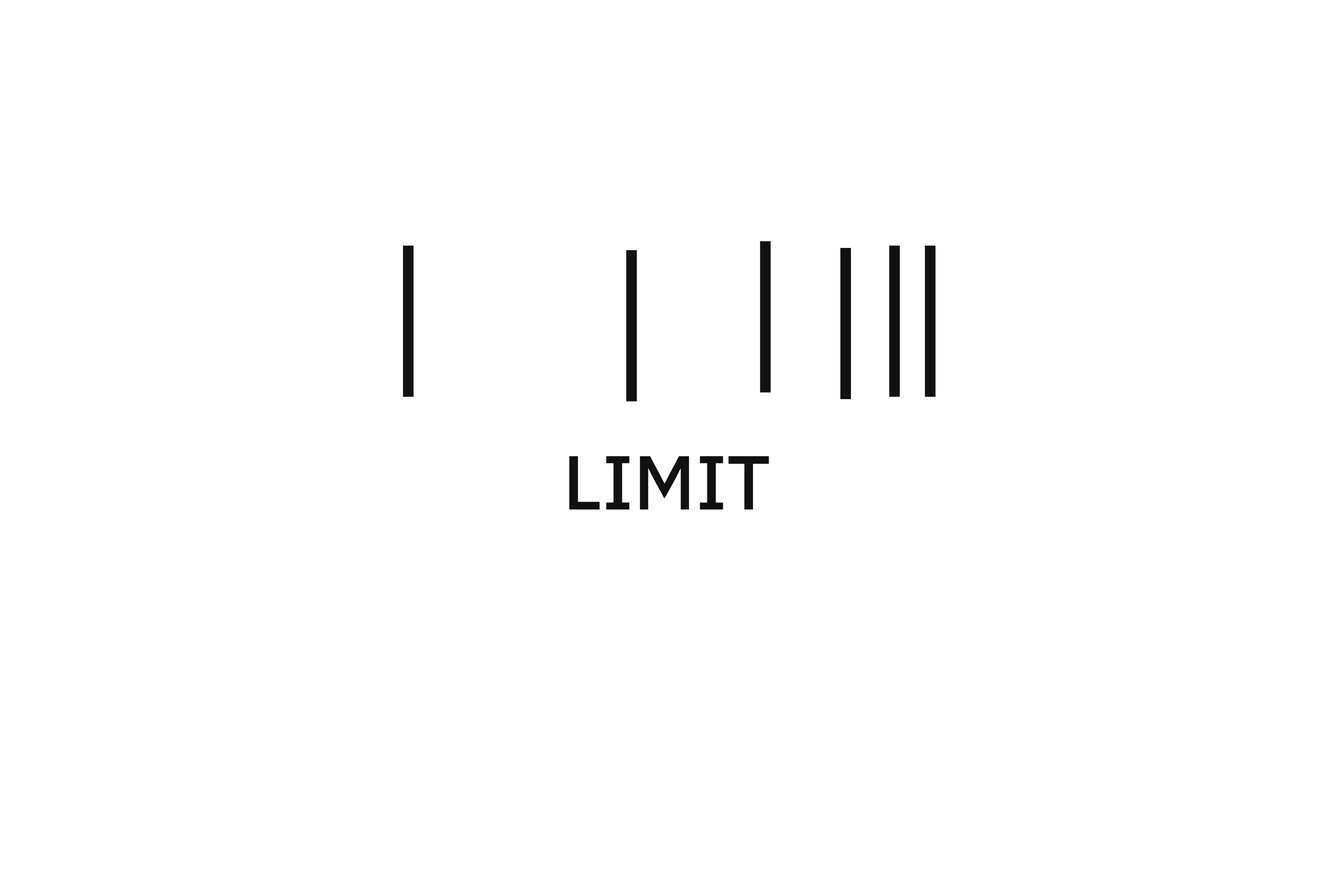
<style>
.page{position:relative;width:1337px;height:892px;background:#ffffff}
.page>*{position:absolute;margin:0}
.t1{font:76.4px "IBMPlexSans-Medium";color:#111111}
</style>
<div class="page">
<p class="t1" style="left:569px;top:456px;width:200px;height:53px">LIMIT</p>
</div>
